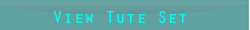
<style>
.page{position:relative;width:250px;height:30px;background:#5fa2a0}
.page>*{position:absolute;margin:0}
.t1{font:16.7px "OratorStd";color:#00fef6;scale:1.04 1}
</style>
<div class="page">
<p class="t1" style="left:54px;top:11px;width:132px;height:12px">View Tute Set</p>
</div>
